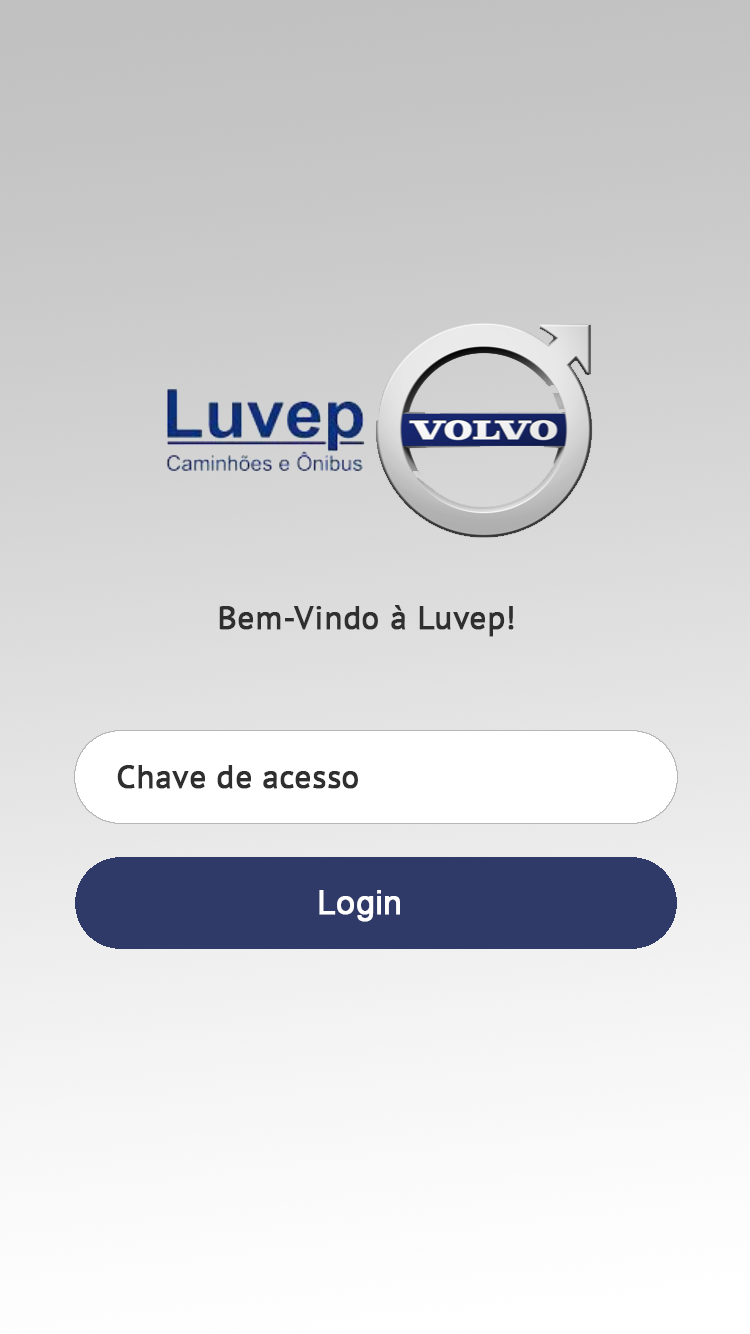
<style>
.page{position:relative;width:750px;height:1334px}
.page>*{position:absolute;margin:0}
.t1{font:33px "PTSans-Regular";color:#2f2f2f;font-weight:bold}
.t2{font:33px "ArialMT";color:#ffffff;font-weight:bold}
</style>
<div class="page">
<p class="t1" style="left:219px;top:605px;width:295px;height:32px">Bem-Vindo à Luvep!</p>
<p class="t1" style="left:117px;top:765px;width:241px;height:24px">Chave de acesso</p>
<p class="t2" style="left:319px;top:890px;width:81px;height:32px">Login</p>
</div>
